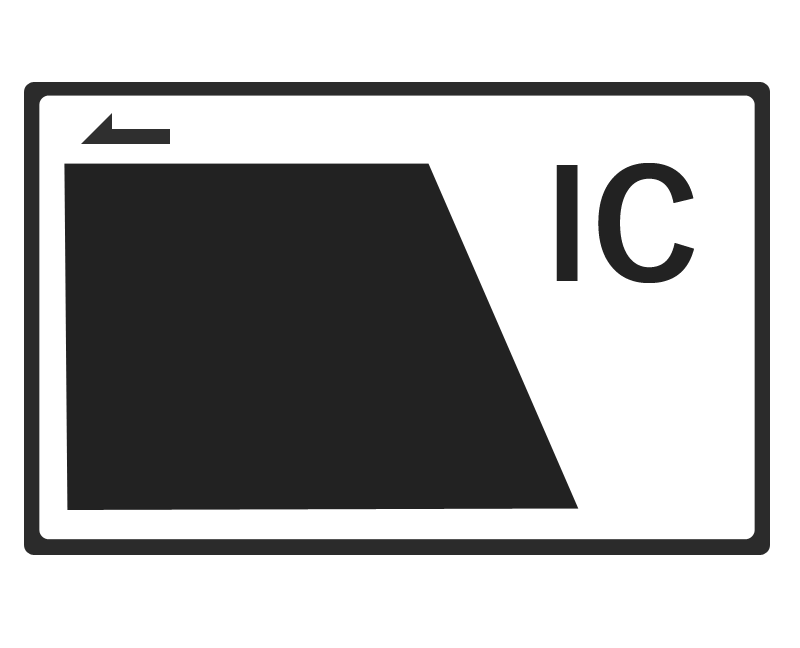
<style>
.page{position:relative;width:800px;height:648px;background:#ffffff}
.page>*{position:absolute;margin:0}
.t1{font:150px "YuGothic-Bold";color:#222222}
</style>
<div class="page">
<p class="t1" style="left:556px;top:163px;width:138px;height:120px">IC</p>
</div>
